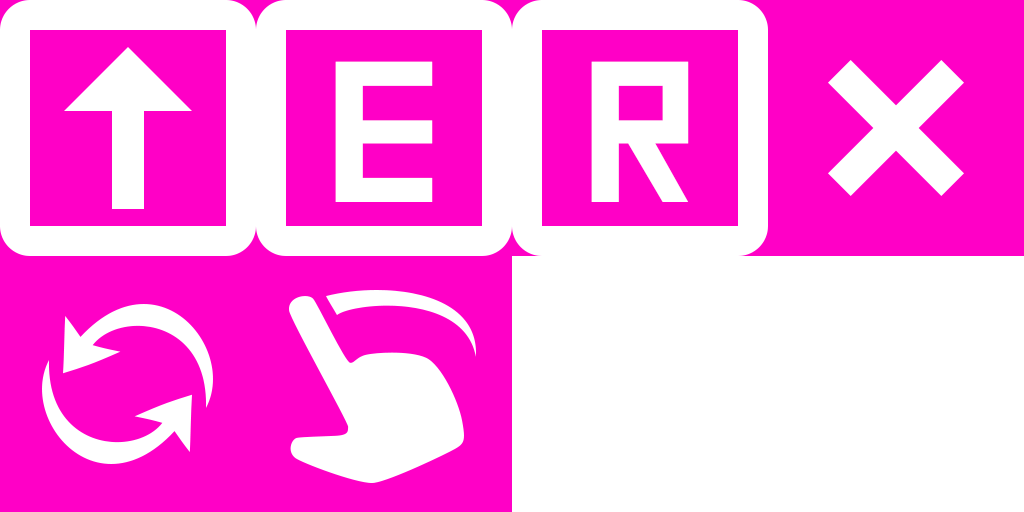
<style>
.page{position:relative;width:1024px;height:512px;background:#ffffff}
.page>*{position:absolute;margin:0}
.t1{font:200px "SquareFont";color:#ffffff}
</style>
<div class="page">
<p class="t1" style="left:335px;top:61px;width:98px;height:141px">E</p>
<p class="t1" style="left:591px;top:61px;width:98px;height:141px">R</p>
</div>
